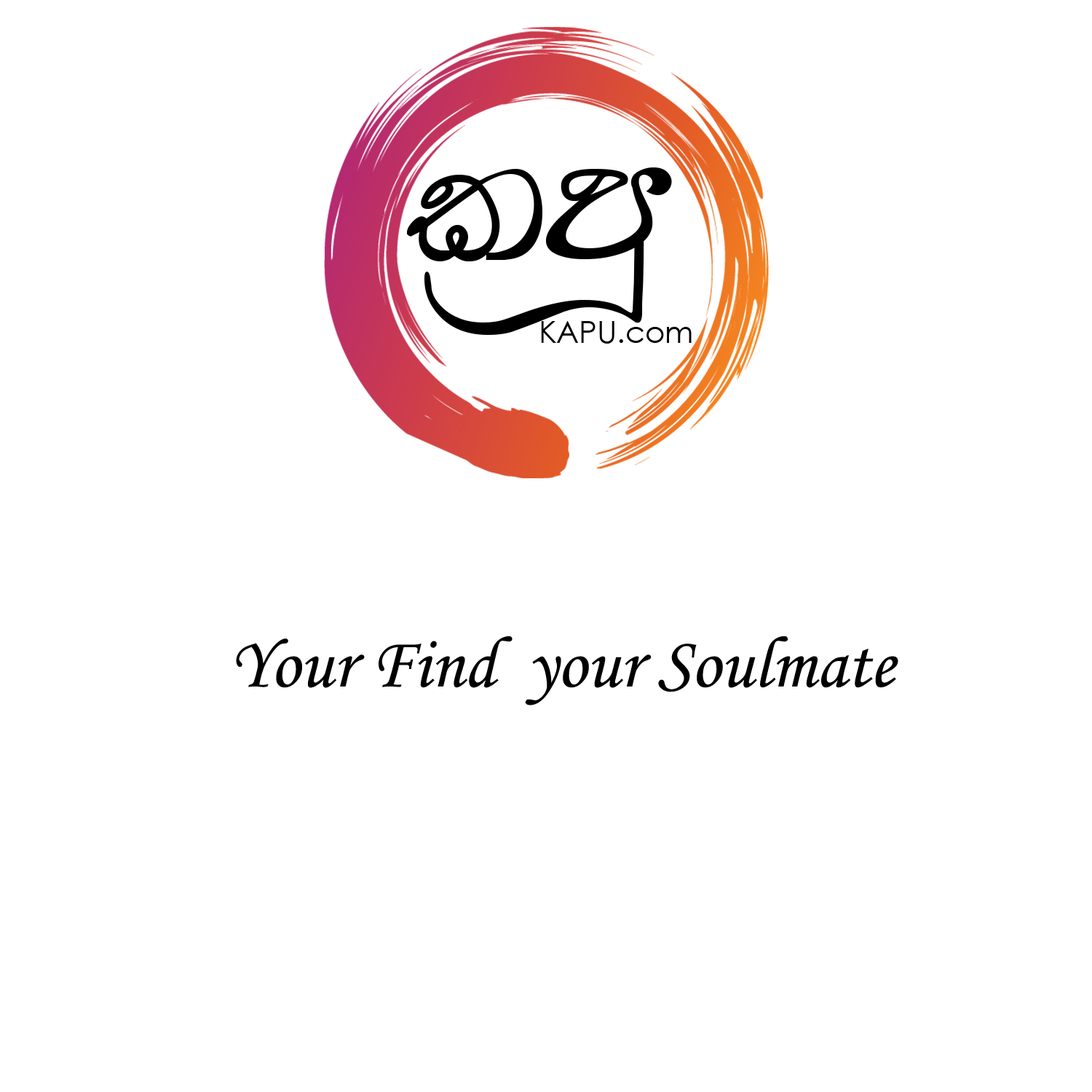
<style>
.page{position:relative;width:1092px;height:1092px;background:#ffffff}
.page>*{position:absolute;margin:0}
.t1{font:182px "FNNILANTHINormal";color:#000000}
.t2{font:30.3px "CenturyGothic";color:#000000}
.t3{font:72.8px "MonotypeCorsiva";color:#000000}
</style>
<div class="page">
<p class="t1" style="left:407px;top:167px;width:265px;height:168px">lmQ</p>
<p class="t2" style="left:541px;top:321px;width:151px;height:23px">KAPU.com</p>
<p class="t3" style="left:236px;top:636px;width:662px;height:69px">Your Find  your Soulmate</p>
</div>
